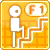
<style>
.page{position:relative;width:50px;height:50px}
.page>*{position:absolute;margin:0}
.t1{font:12px "AmiraParadiso";color:#fa830c}
</style>
<div class="page">
<p class="t1" style="left:29px;top:5px;width:6px;height:9px">F</p>
</div>
